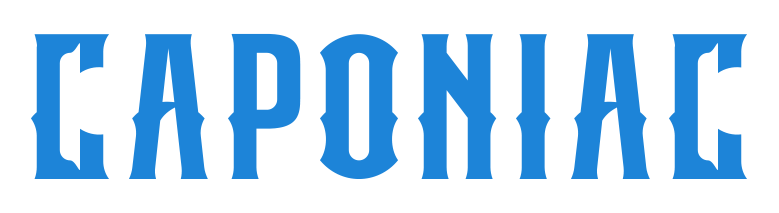
<style>
.page{position:relative;width:779px;height:213px;background:#ffffff}
.page>*{position:absolute;margin:0}
.t1{font:200px "KINGDOMCROWN";color:#1d84d8;text-transform:uppercase}
</style>
<div class="page">
<p class="t1" style="left:31px;top:33px;width:717px;height:146px">caponiac</p>
</div>
